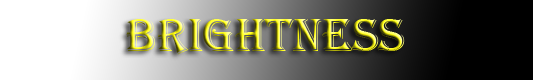
<style>
.page{position:relative;width:533px;height:80px}
.page>*{position:absolute;margin:0}
.t1{font:48px "Algerian"}
</style>
<div class="page">
<p class="t1" style="left:126px;top:19px;width:279px;height:36px">brightness</p>
</div>
